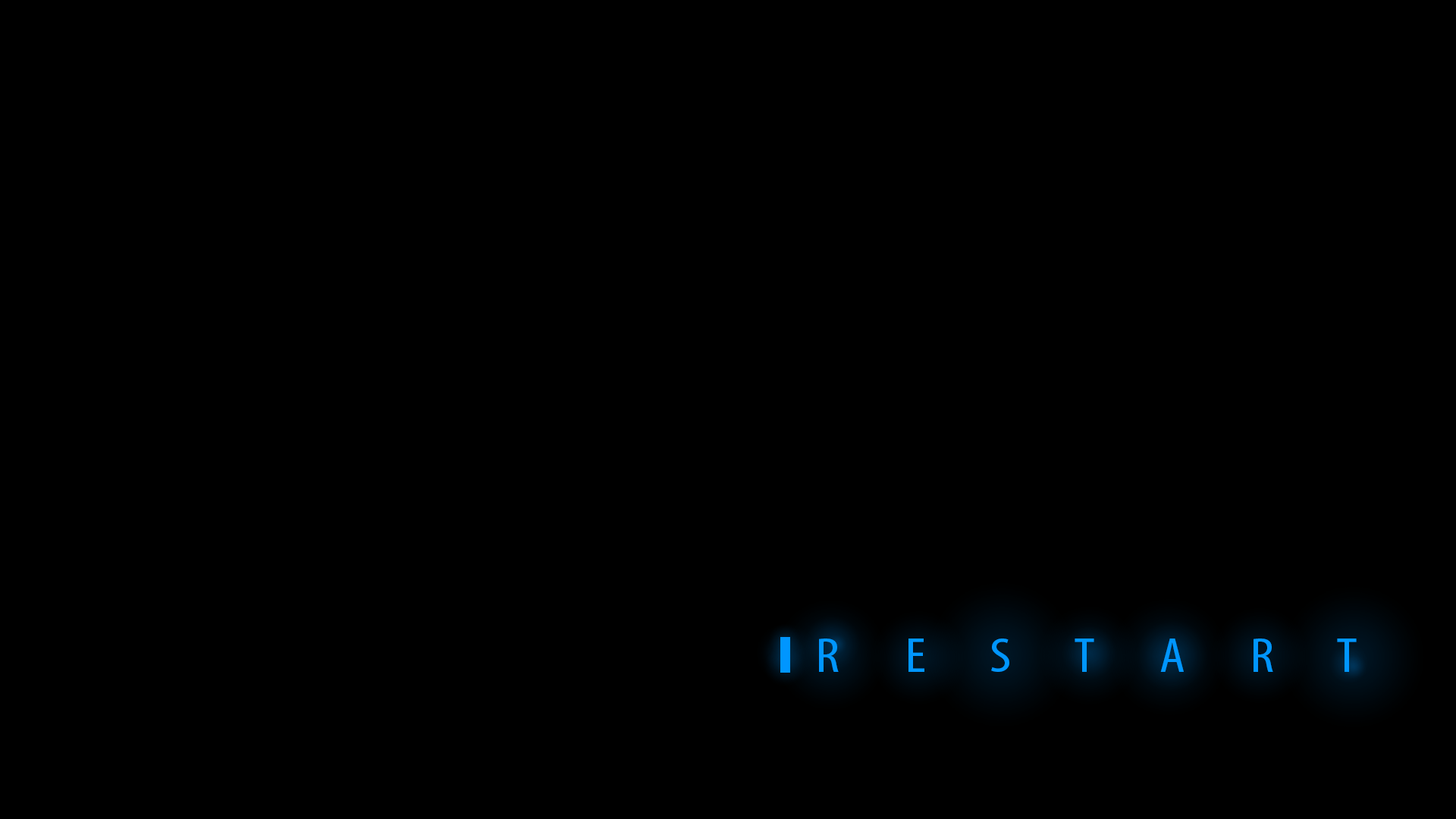
<style>
.page{position:relative;width:1456px;height:819px;background:#000000}
.page>*{position:absolute;margin:0}
.t1{font:49.7px "MyriadPro-Cond";color:#0096ff;scale:1.18 1}
</style>
<div class="page">
<p class="t1" style="left:819px;top:639px;width:538px;height:33px">R       E       S       T       A       R       T</p>
</div>
